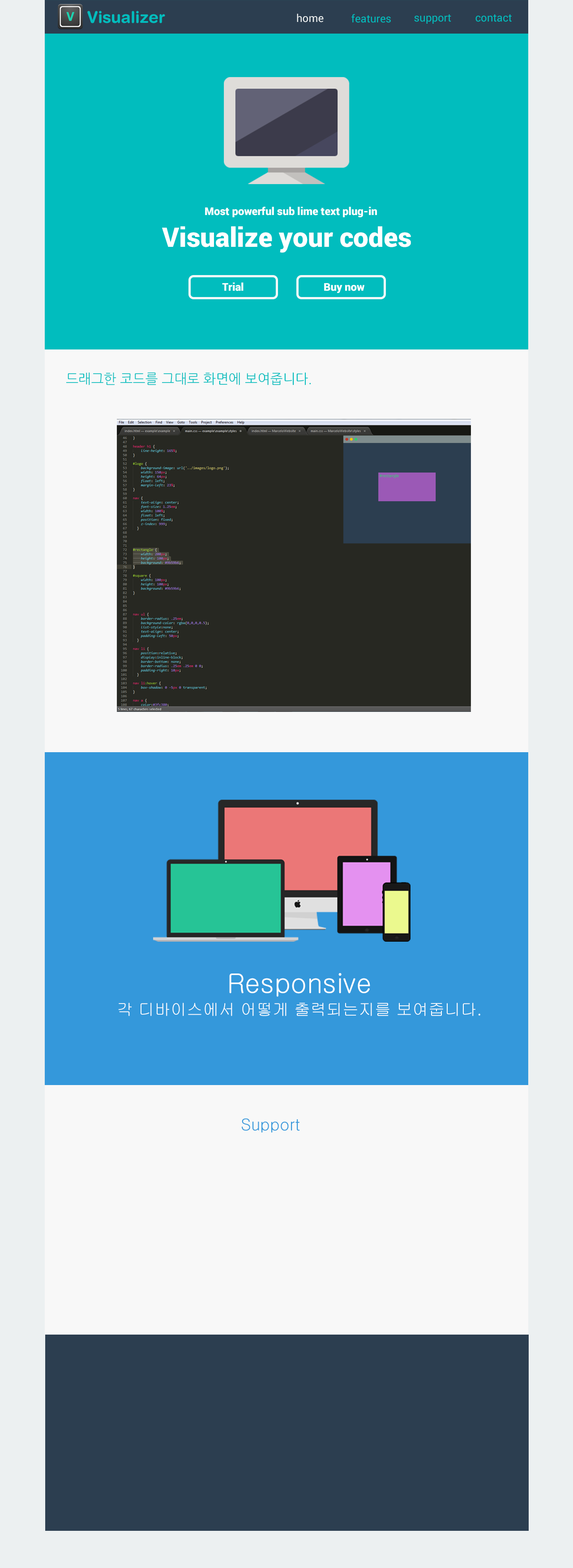
<style>
.page{position:relative;width:573px;height:1568px;background:#f8f8f8}
.page>*{position:absolute;margin:0}
.t1{font:16.1px "HelveticaRounded-Bold";color:#01bdbe}
.t2{font:10.8px "Roboto-Regular";color:#ecf0f1}
.t3{font:10.8px "Roboto-Regular";color:#01bdbe}
.t4{font:10.8px "Roboto-Black";color:#ffffff}
.t5{font:26.9px "Roboto-Black";color:#ffffff}
.t6{font:13.4px "NanumGothic";color:#01bdbe}
.t7{font:16.1px/11.2px "Gulim";color:#ffffff}
.t8{font:26.9px/11.2px "Gulim";color:#ffffff}
.t9{font:16.1px "Gulim";color:#3498db}
</style>
<div class="page">
<p class="t1" style="left:87px;top:11px;width:78px;height:12px">Visualizer</p>
<p class="t2" style="left:297px;top:13px;width:27px;height:9px">home</p>
<p class="t3" style="left:352px;top:14px;width:39px;height:9px">features</p>
<p class="t3" style="left:414px;top:14px;width:38px;height:10px">support</p>
<p class="t3" style="left:476px;top:14px;width:36px;height:8px">contact</p>
<p class="t4" style="left:205px;top:207px;width:172px;height:10px">Most powerful sub lime text plug-in</p>
<p class="t5" style="left:162px;top:226px;width:249px;height:27px">Visualize your codes</p>
<p class="t4" style="left:222px;top:282px;width:22px;height:9px">Trial</p>
<p class="t4" style="left:324px;top:283px;width:41px;height:10px">Buy now</p>
<p class="t6" style="left:66px;top:372px;width:245px;height:13px">드래그한 코드를 그대로 화면에 보여줍니다.</p>
<p class="t7" style="left:118px;top:973px;width:363px;height:43px;text-align:center"><span class="t8">Responsive<br></span><br>각 디바이스에서 어떻게 출력되는지를 보여줍니다.</p>
<p class="t9" style="left:242px;top:1118px;width:58px;height:15px">Support</p>
</div>
